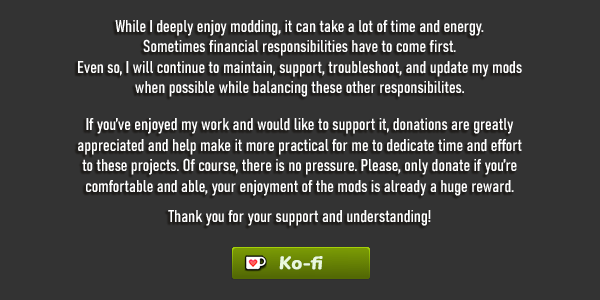
<style>
.page{position:relative;width:600px;height:300px;background:#333333}
.page>*{position:absolute;margin:0}
.t1{font:17px "Bahnschrift-Condensed";color:#ffffff;font-weight:bold}
</style>
<div class="page">
<p class="t1" style="left:78px;top:20px;width:444px;height:206px;text-align:center">While I deeply enjoy modding, it can take a lot of time and energy. <br>Sometimes financial responsibilities have to come first. <br>Even so, I will continue to maintain, support, troubleshoot, and update my mods when possible while balancing these other responsibilites.<br> <br>If you’ve enjoyed my work and would like to support it, donations are greatly appreciated and help make it more practical for me to dedicate time and effort to these projects. Of course, there is no pressure. Please, only donate if you’re comfortable and able, your enjoyment of the mods is already a huge reward. <br> <br>Thank you for your support and understanding!</p>
</div>
